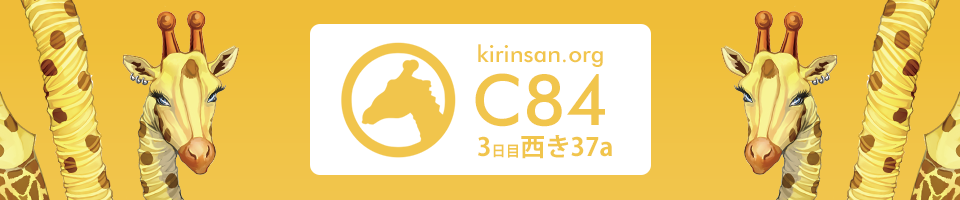
<style>
.page{position:relative;width:960px;height:200px}
.page>*{position:absolute;margin:0}
.t1{font:23.5px "FuturaBT-Medium";color:#f1c54c}
.t2{font:70.4px "FuturaBT-Medium";color:#f1c54c}
.t3{font:25.1px "KozGoPr6N-Bold";color:#f1c54c}
.t4{font:14.4px "KozGoPr6N-Bold";color:#f1c54c}
</style>
<div class="page">
<p class="t1" style="left:478px;top:44px;width:125px;height:23px">kirinsan.org</p>
<p class="t2" style="left:475px;top:73px;width:130px;height:54px">C84</p>
<p class="t3" style="left:478px;top:135px;width:134px;height:24px">3<span class="t4">日目</span>西き37a</p>
</div>
